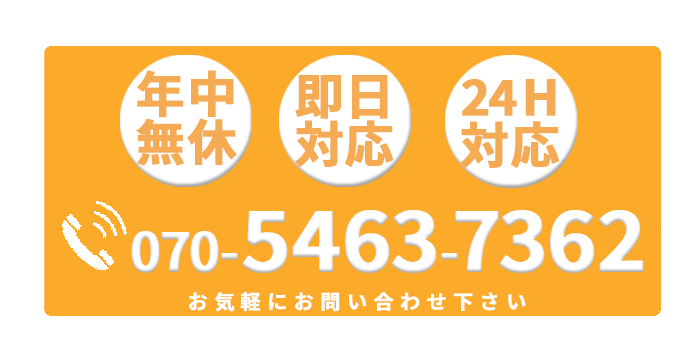
<style>
.page{position:relative;width:700px;height:350px;background:#ffffff}
.page>*{position:absolute;margin:0}
.t1{font:49px/48px "SourceHanSansJP-Bold";letter-spacing:0.1em;color:#f5ab54;font-weight:bold}
.t2{font:53.6px "SourceHanSansJP-Bold";letter-spacing:0.1em;color:#ffffff;font-weight:bold}
.t3{font:83.8px "SourceHanSansJP-Bold";letter-spacing:0.1em;color:#ffffff;font-weight:bold}
.t4{font:20px "SourceHanSansJP-Bold";letter-spacing:0.3em;color:#ffffff;font-weight:bold}
</style>
<div class="page">
<p class="t1" style="left:136px;top:70px;width:101px;height:96px;text-align:center">年中<br>無休</p>
<p class="t1" style="left:295px;top:75px;width:98px;height:92px;text-align:center">即日<br>対応</p>
<p class="t1" style="left:460px;top:79px;width:99px;height:89px;text-align:center">24H<br>対応</p>
<p class="t2" style="left:131px;top:210px;width:513px;height:63px">070-<span class="t3">5463</span>-<span class="t3">7362</span></p>
<p class="t4" style="left:189px;top:291px;width:337px;height:21px">お気軽にお問い合わせ下さい</p>
</div>
